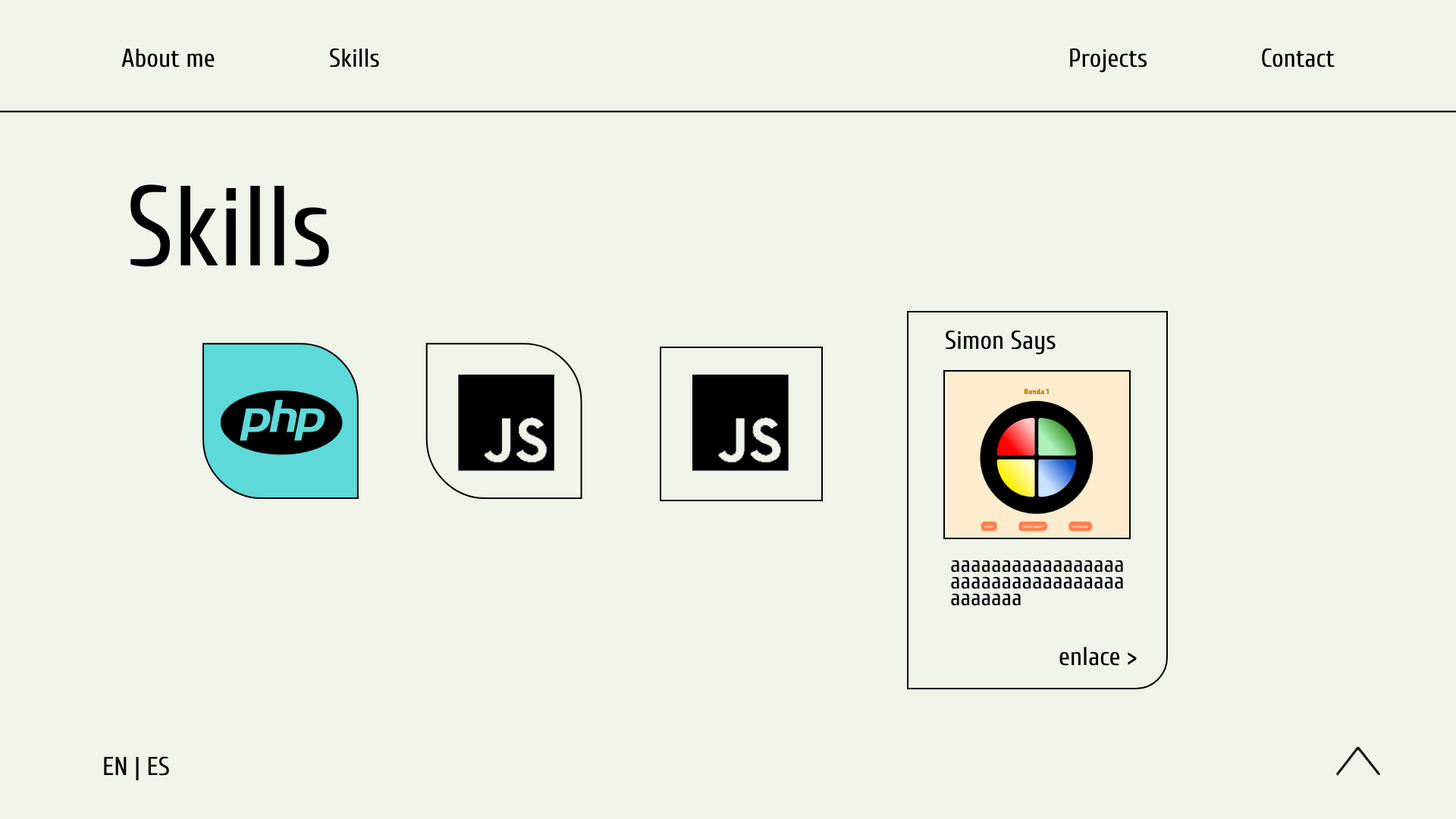
<style>
.page{position:relative;width:1456px;height:819px;background:#eff3ea}
.page>*{position:absolute;margin:0}
.t1{font:25.8px "Cuprum-Regular";color:#000000}
.t2{font:113.7px "Cuprum-Regular";color:#000000;scale:0.92 1}
.t3{font:22.7px/16.7px "Cuprum-Regular";color:#000000}
</style>
<div class="page">
<p class="t1" style="left:121px;top:49px;width:94px;height:18px">About me</p>
<p class="t1" style="left:330px;top:48px;width:49px;height:19px">Skills</p>
<p class="t1" style="left:1070px;top:48px;width:77px;height:25px">Projects</p>
<p class="t1" style="left:1262px;top:48px;width:73px;height:19px">Contact</p>
<p class="t2" style="left:130px;top:184px;width:199px;height:83px">Skills</p>
<p class="t1" style="left:946px;top:330px;width:110px;height:25px">Simon Says</p>
<p class="t3" style="left:951px;top:560px;width:172px;height:46px">aaaaaaaaaaaaaaaaa<br>aaaaaaaaaaaaaaaaa<br>aaaaaaa</p>
<p class="t1" style="left:1059px;top:647px;width:78px;height:19px">enlace &gt;</p>
<p class="t1" style="left:104px;top:756px;width:65px;height:24px">EN | ES</p>
</div>
